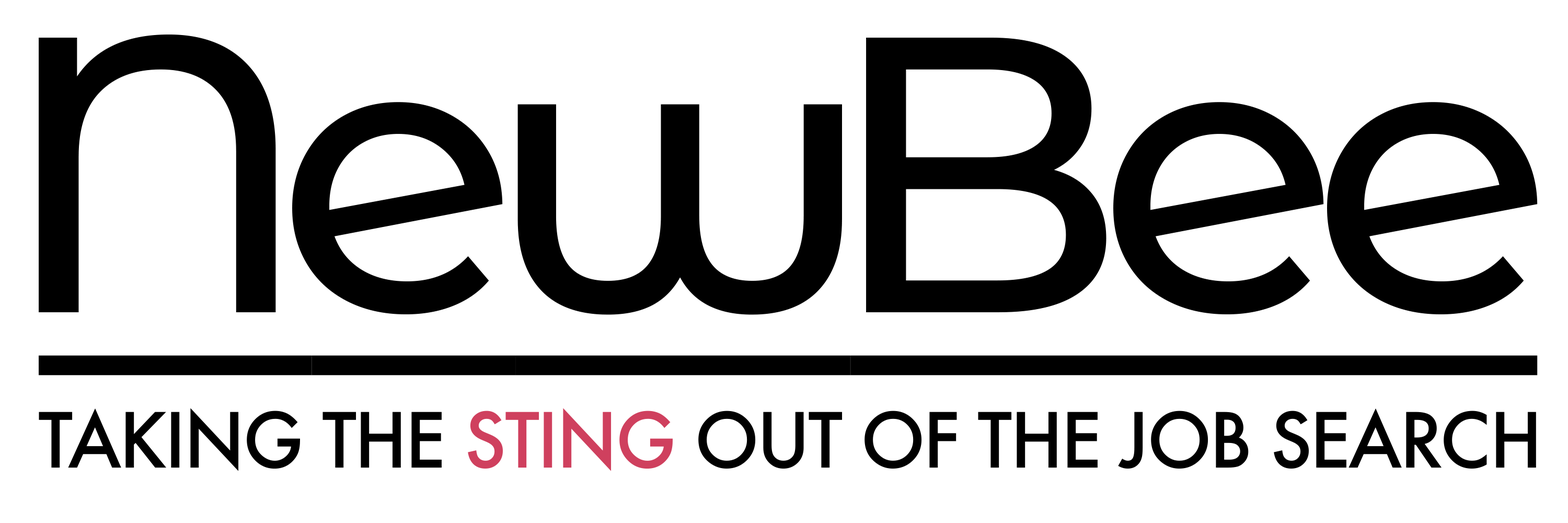
<style>
.page{position:relative;width:1568px;height:523px;background:#ffffff}
.page>*{position:absolute;margin:0}
.t1{font:392px "MontserratAlternates-Medium";letter-spacing:-0.075em;color:#000000}
.t2{font:392px "MontserratAlternates-Medium";letter-spacing:-0.1em;color:#000000}
.t3{font:392px "MontserratAlternates-Medium";letter-spacing:-0.09em;color:#000000}
.t4{font:392px "MontserratAlternates-Medium";letter-spacing:-0.13em;color:#000000}
.t5{font:73.8px "Futura-Medium";letter-spacing:-0.028em;color:#000000}
.t6{font:73.8px "Futura-Medium";letter-spacing:-0.028em;color:#cf405e}
</style>
<div class="page">
<p class="t1" style="left:39px;top:34px;width:1499px;height:281px"><span class="t2">N</span><span class="t3">e</span><span class="t4">w</span>Bee</p>
<p class="t5" style="left:39px;top:408px;width:1497px;height:63px">TAKING THE <span class="t6">STING</span> OUT OF THE JOB SEARCH</p>
</div>
